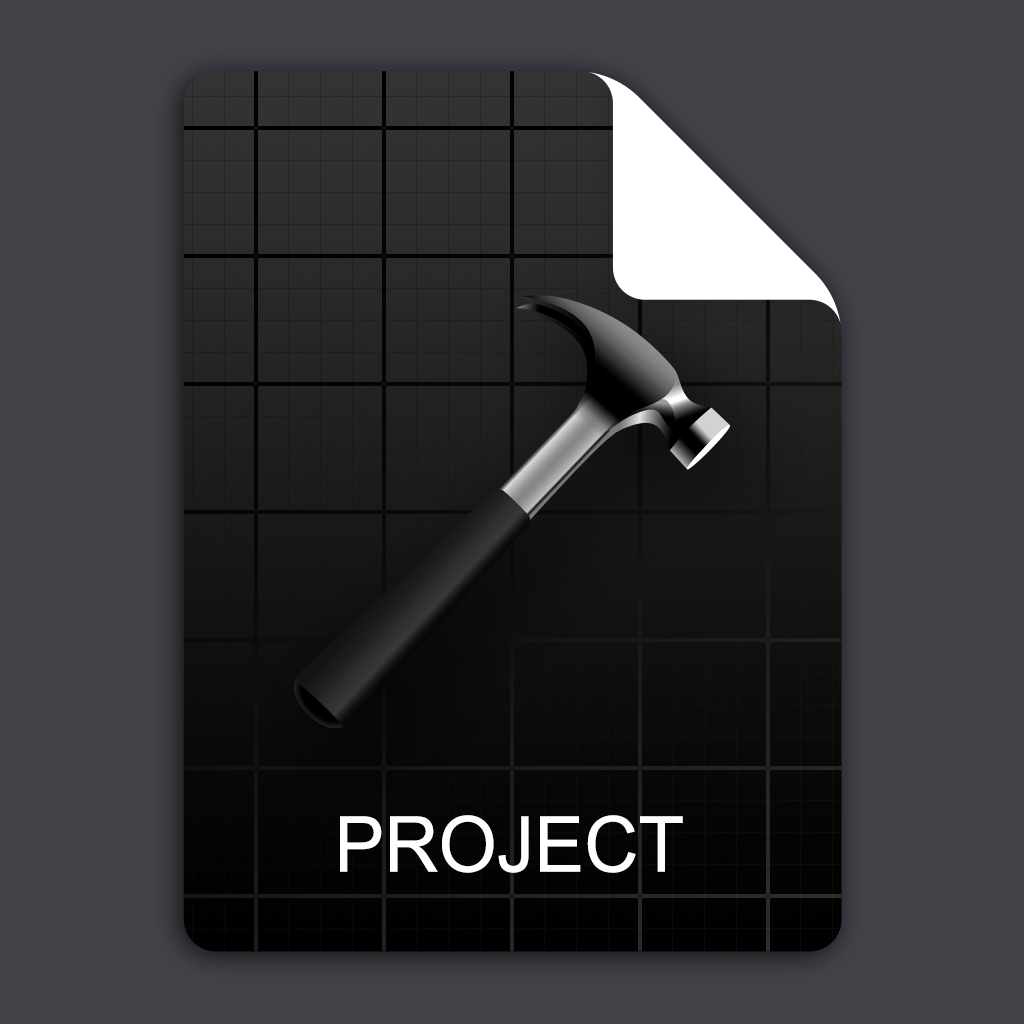
<style>
.page{position:relative;width:1024px;height:1024px;background:#444149}
.page>*{position:absolute;margin:0}
.t1{font:77.3px "ArialMT";color:#ffffff}
</style>
<div class="page">
<p class="t1" style="left:340px;top:815px;width:343px;height:58px">PROJECT</p>
</div>
